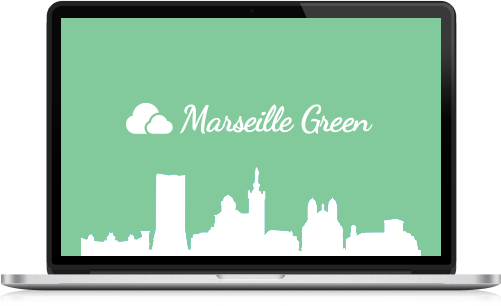
<style>
.page{position:relative;width:501px;height:306px;background:#82ca9c}
.page>*{position:absolute;margin:0}
.t1{font:36px "DancingScript-Bold";letter-spacing:-0.025em;color:#ffffff}
</style>
<div class="page">
<p class="t1" style="left:180px;top:104px;width:193px;height:30px">Marseille Green</p>
</div>
